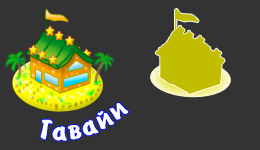
<style>
.page{position:relative;width:260px;height:150px;background:#333333}
.page>*{position:absolute;margin:0}
.t1{font:30px "BrushType-Bold";letter-spacing:0.05em;color:#ffffff}
</style>
<div class="page">
<p class="t1" style="left:40px;top:103px;width:89px;height:38px;rotate:-17deg">Ãàâàéè</p>
</div>
